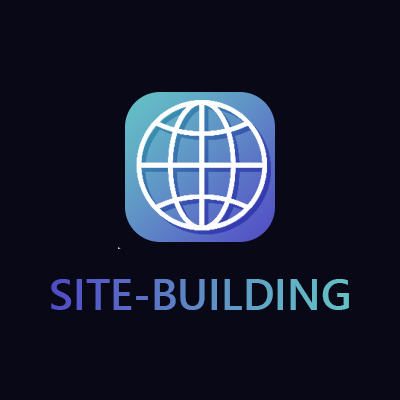
<style>
.page{position:relative;width:400px;height:400px;background:#080816}
.page>*{position:absolute;margin:0}
.t1{font:44px "YuGothicUI-Bold"}
</style>
<div class="page">
<p class="t1" style="left:51px;top:279px;width:298px;height:31px">SITE-BUILDING</p>
</div>
